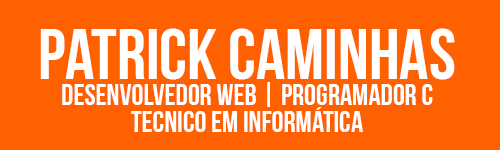
<style>
.page{position:relative;width:500px;height:150px;background:#ff6100}
.page>*{position:absolute;margin:0}
.t1{font:72px "BebasNeueBold";color:#ffffff}
.t2{font:30px/27px "BebasNeueBold";color:#ffffff}
</style>
<div class="page">
<p class="t1" style="left:40px;top:28px;width:415px;height:52px">Patrick Caminhas</p>
<p class="t2" style="left:62px;top:82px;width:371px;height:50px;text-align:center">desenvolvedor wEB | programador C<br>tecnico em informática</p>
</div>
